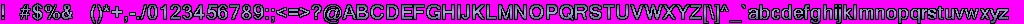
<style>
.page{position:relative;width:1024px;height:24px;background:#ff00ff}
.page>*{position:absolute;margin:0}
.t1{font:30px "Kartika";letter-spacing:0.025em}
</style>
<div class="page">
<p class="t1" style="left:2px;top:4px;width:1006px;height:19px">! #$%&amp; ()*+,-./0123456789:;&lt;=&gt;?@ABCDEFGHIJKLMNOPQRSTUVWXYZ[\]^_`abcdefghijklmnopqrstuvwxyz</p>
</div>
